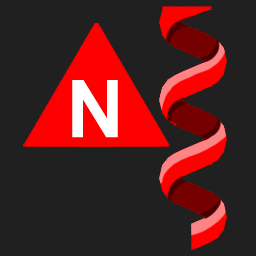
<style>
.page{position:relative;width:256px;height:256px;background:#202020}
.page>*{position:absolute;margin:0}
.t1{font:80px "Arial-BoldMT";letter-spacing:0.05em;color:#ffffff}
</style>
<div class="page">
<p class="t1" style="left:72px;top:80px;width:46px;height:58px">N</p>
</div>
